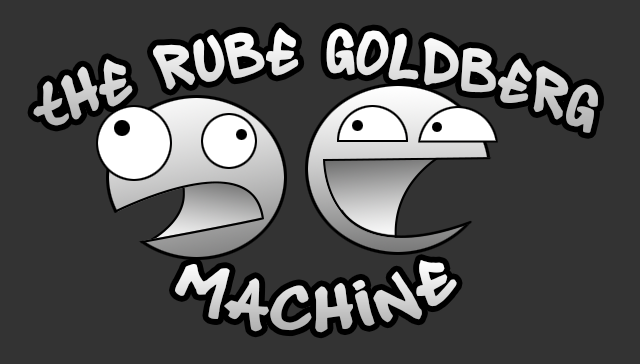
<style>
.page{position:relative;width:640px;height:364px;background:#333333}
.page>*{position:absolute;margin:0}
.t1{font:63.9px "pandastyle1";scale:0.9 1}
.t2{font:64px "pandastyle1"}
</style>
<div class="page">
<p class="t1" style="left:33px;top:28px;width:565px;height:105px">The Rube Goldberg</p>
<p class="t2" style="left:175px;top:260px;width:282px;height:73px">machine</p>
</div>
